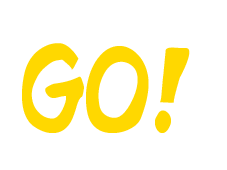
<style>
.page{position:relative;width:227px;height:170px;background:#ffffff}
.page>*{position:absolute;margin:0}
.t1{font:119.3px "ComicBook";color:#ffd800;scale:0.72 1}
</style>
<div class="page">
<p class="t1" style="left:22px;top:43px;width:168px;height:90px">!GO</p>
</div>
